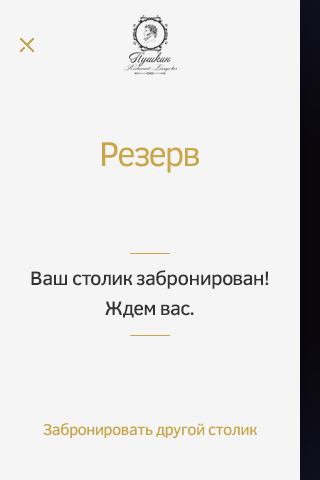
<style>
.page{position:relative;width:320px;height:480px;background:#f5f5f5}
.page>*{position:absolute;margin:0}
.t1{font:35px "ClearSans";letter-spacing:-0.05em;color:#caa646}
.t2{font:35px "ClearSans";letter-spacing:-0.06em;color:#caa646}
.t3{font:35px "ClearSans";letter-spacing:-0.025em;color:#caa646}
.t4{font:35px "ClearSans";letter-spacing:-0.075em;color:#caa646}
.t5{font:20px/30px "ClearSans-Medium";letter-spacing:-0.04em;color:#333333}
.t6{font:20px/30px "ClearSans-Medium";color:#333333}
.t7{font:20px/30px "ClearSans-Medium";letter-spacing:-0.05em;color:#333333}
.t8{font:20px/30px "ClearSans-Medium";letter-spacing:-0.025em;color:#333333}
.t9{font:16px "ClearSans-Medium";letter-spacing:-0.025em;color:#caa646}
.t10{font:16px "ClearSans-Medium";color:#caa646}
</style>
<div class="page">
<p class="t1" style="left:102px;top:142px;width:97px;height:31px"><span class="t2">Р</span><span class="t3">е</span>зе<span class="t4">р</span><span class="t3">в</span></p>
<p class="t5" style="left:31px;top:270px;width:238px;height:48px;text-align:center">Ваш <span class="t6">с</span>т<span class="t6">о</span>лик за<span class="t7">б</span>р<span class="t6">о</span>нирован!<br><span class="t6">Ж</span><span class="t8">д</span>ем вас.</p>
<p class="t9" style="left:43px;top:423px;width:214px;height:15px">Забронирова<span class="t10">т</span>ь другой <span class="t10">ст</span>олик</p>
</div>
